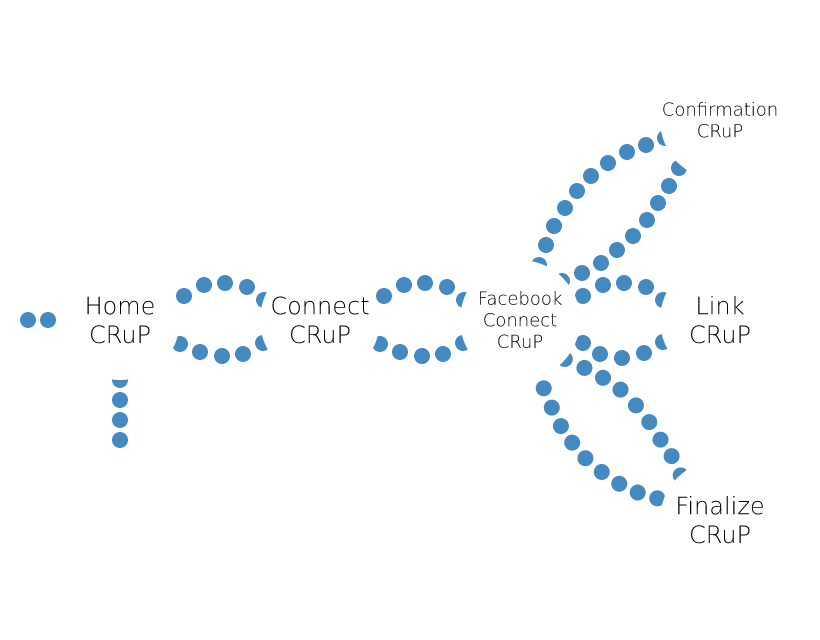
<style>
.page{position:relative;width:820px;height:640px;background:#ffffff}
.page>*{position:absolute;margin:0}
.t1{font:18px "DejaVuSans-ExtraLight";color:#000000}
.t2{font:24px "DejaVuSans-ExtraLight";color:#000000}
</style>
<div class="page">
<p class="t1" style="left:663px;top:102px;width:114px;height:36px;text-align:center">Confirmation<br>CRuP</p>
<p class="t1" style="left:479px;top:291px;width:83px;height:58px;text-align:center">Facebook<br>Connect<br>CRuP</p>
<p class="t2" style="left:87px;top:296px;width:67px;height:48px;text-align:center">Home<br>CRuP</p>
<p class="t2" style="left:272px;top:296px;width:97px;height:48px;text-align:center">Connect<br>CRuP</p>
<p class="t2" style="left:690px;top:296px;width:60px;height:48px;text-align:center">Link<br>CRuP</p>
<p class="t2" style="left:678px;top:496px;width:85px;height:48px;text-align:center">Finalize<br>CRuP</p>
</div>
